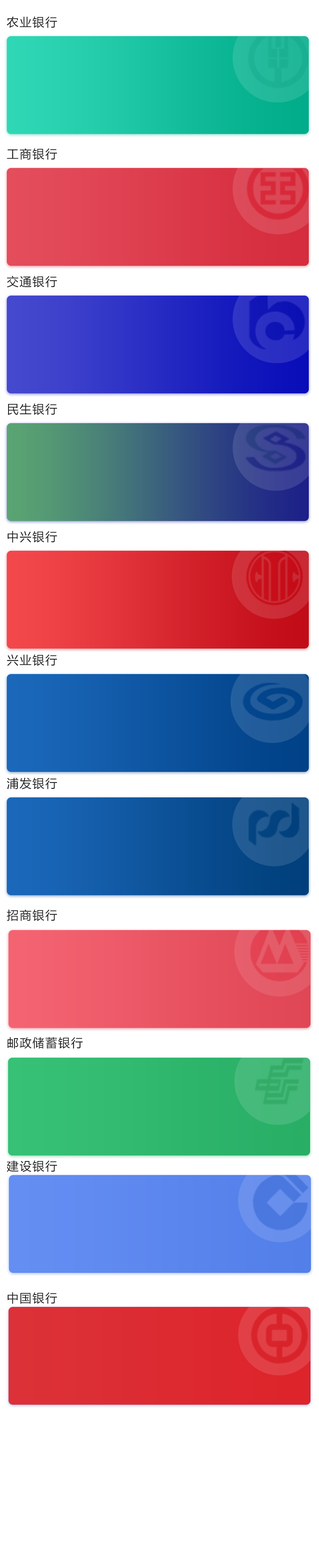
<style>
.page{position:relative;width:319px;height:1568px;background:#ffffff}
.page>*{position:absolute;margin:0}
.t1{font:11.9px "MicrosoftYaHei";letter-spacing:0.08em;color:#202020}
</style>
<div class="page">
<p class="t1" style="left:7px;top:16px;width:50px;height:12px">农业银行</p>
<p class="t1" style="left:7px;top:148px;width:50px;height:12px">工商银行</p>
<p class="t1" style="left:7px;top:276px;width:50px;height:11px">交通银行</p>
<p class="t1" style="left:8px;top:403px;width:49px;height:12px">民生银行</p>
<p class="t1" style="left:8px;top:531px;width:49px;height:12px">中兴银行</p>
<p class="t1" style="left:7px;top:654px;width:50px;height:12px">兴业银行</p>
<p class="t1" style="left:7px;top:777px;width:50px;height:12px">浦发银行</p>
<p class="t1" style="left:7px;top:909px;width:50px;height:12px">招商银行</p>
<p class="t1" style="left:7px;top:1037px;width:76px;height:12px">邮政储蓄银行</p>
<p class="t1" style="left:7px;top:1160px;width:50px;height:12px">建设银行</p>
<p class="t1" style="left:8px;top:1292px;width:49px;height:12px">中国银行</p>
</div>
